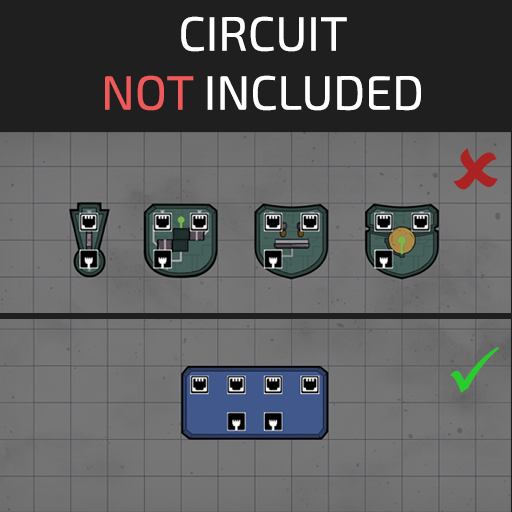
<style>
.page{position:relative;width:512px;height:512px;background:#1f1f1f}
.page>*{position:absolute;margin:0}
.t1{font:48px "Exo2-Regular";color:#ffffff}
.t2{font:48px "Exo2-Regular";color:#ee5959}
</style>
<div class="page">
<p class="t1" style="left:181px;top:16px;width:166px;height:36px">CIRCUIT</p>
<p class="t1" style="left:105px;top:75px;width:316px;height:36px"><span class="t2">NOT</span> INCLUDED</p>
</div>
